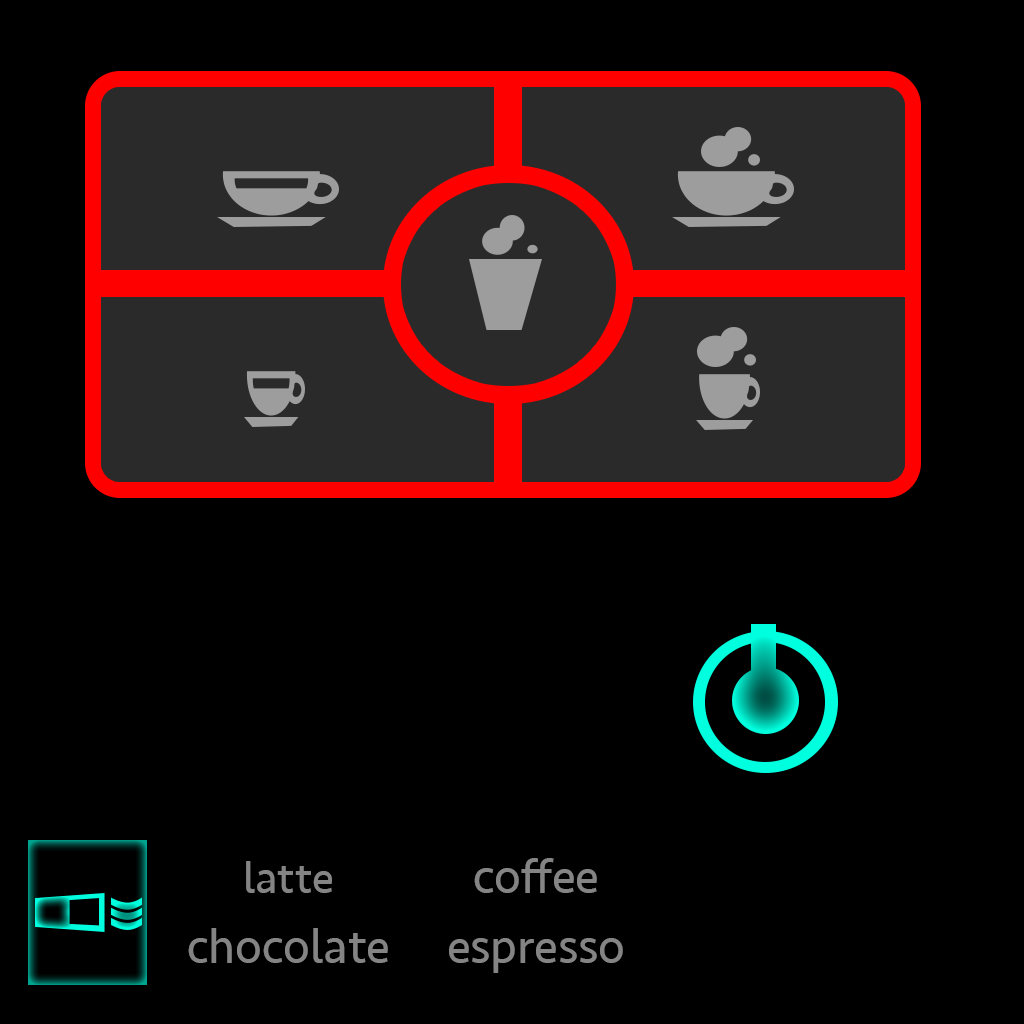
<style>
.page{position:relative;width:1024px;height:1024px;background:#000000}
.page>*{position:absolute;margin:0}
.t1{font:44.6px "Seravek";color:#848484}
.t2{font:48.6px "Seravek";color:#848484}
</style>
<div class="page">
<p class="t1" style="left:246px;top:861px;width:86px;height:32px">latte</p>
<p class="t2" style="left:474px;top:858px;width:123px;height:35px">coffee</p>
<p class="t2" style="left:188px;top:928px;width:200px;height:35px">chocolate</p>
<p class="t2" style="left:449px;top:938px;width:174px;height:35px">espresso</p>
</div>
